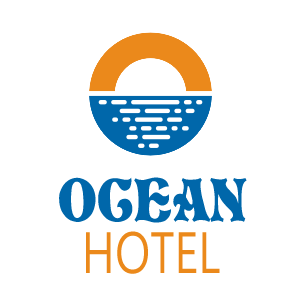
<style>
.page{position:relative;width:300px;height:300px;background:#ffffff}
.page>*{position:absolute;margin:0}
.t1{font:58.3px "Vivian";color:#0067aa;text-transform:uppercase;scale:0.8 1}
.t2{font:58.3px "SegoeUI";color:#eb891b;text-transform:uppercase;scale:0.8 1}
</style>
<div class="page">
<p class="t1" style="left:59px;top:177px;width:188px;height:46px">ocean</p>
<p class="t2" style="left:86px;top:231px;width:134px;height:43px">Hotel</p>
</div>
